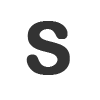
<style>
.page{position:relative;width:100px;height:100px;background:#ffffff}
.page>*{position:absolute;margin:0}
.t1{font:70.6px "ArialRoundedMTBold";letter-spacing:0.1em;color:#333333;font-weight:bold}
</style>
<div class="page">
<p class="t1" style="left:26px;top:21px;width:44px;height:54px">S</p>
</div>
